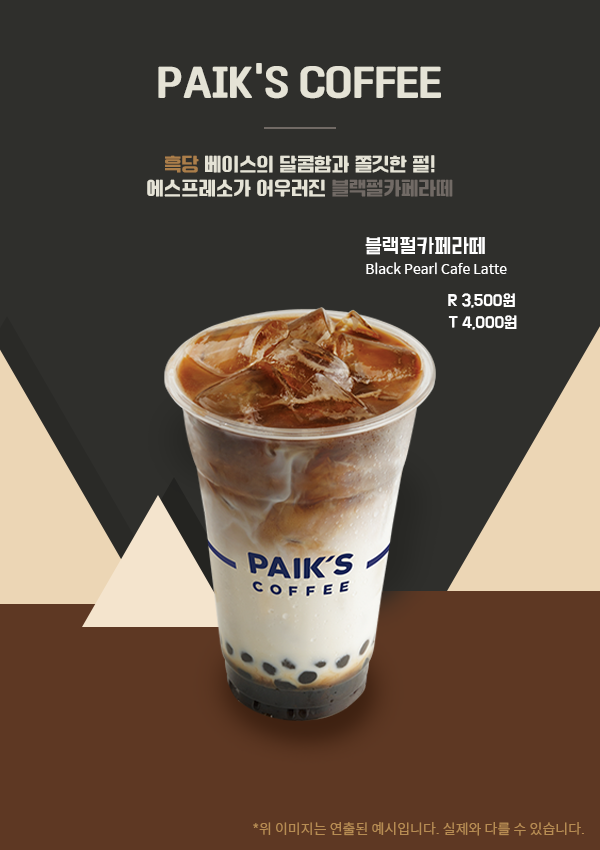
<style>
.page{position:relative;width:600px;height:850px;background:#2f2f2c}
.page>*{position:absolute;margin:0}
.t1{font:40px "MBC-1961GulimM";letter-spacing:-0.03em;color:#e5e3d6}
.t2{font:40px "MBC-1961GulimM";color:#e5e3d6}
.t3{font:20px/24px "MBC-1961GulimM";color:#e5e3d6}
.t4{font:20px/24px "MBC-1961GulimM";color:#ac7e4a}
.t5{font:20px/24px "MBC-1961GulimM";color:#716a65}
.t6{font:18px "BMDoHyeon";color:#ffffff}
.t7{font:14px "SpoqaHanSans-Regular";color:#ffffff}
.t8{font:14px "BMDoHyeon";color:#ffffff}
.t9{font:14px "SpoqaHanSans-Regular";color:#b78c53}
</style>
<div class="page">
<p class="t1" style="left:158px;top:63px;width:283px;height:36px"><span class="t2">PAIK</span>’S COFFEE</p>
<p class="t3" style="left:147px;top:155px;width:306px;height:42px;text-align:center"><span class="t4">흑당</span> 베이스의 달콤함과 쫄깃한 펄!<br>에스프레소가 어우러진 <span class="t5">블랙펄카페라떼</span></p>
<p class="t6" style="left:365px;top:237px;width:120px;height:18px">블랙펄카페라떼</p>
<p class="t7" style="left:366px;top:262px;width:141px;height:13px">Black Pearl Cafe Latte</p>
<p class="t8" style="left:448px;top:293px;width:67px;height:15px">R 3,500원</p>
<p class="t8" style="left:448px;top:315px;width:69px;height:15px">T 4,000원</p>
<p class="t9" style="left:253px;top:822px;width:331px;height:14px">*위 이미지는 연출된 예시입니다. 실제와 다를 수 있습니다.</p>
</div>
